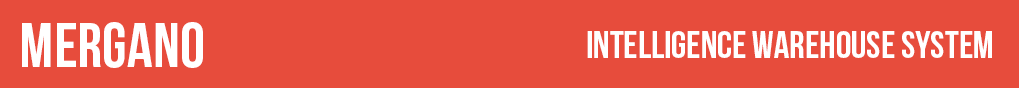
<style>
.page{position:relative;width:1019px;height:88px;background:#e74c3c}
.page>*{position:absolute;margin:0}
.t1{font:63.4px "BebasNeueBold";color:#ffffff}
.t2{font:38.7px "BebasNeueBold";color:#ffffff}
</style>
<div class="page">
<p class="t1" style="left:22px;top:22px;width:181px;height:46px">Mergano</p>
<p class="t2" style="left:587px;top:31px;width:405px;height:27px">INTELLIGENCE WAREHOUSE SYSTEM</p>
</div>
